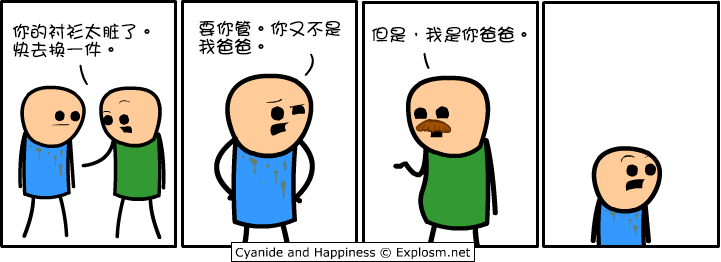
<style>
.page{position:relative;width:721px;height:262px;background:#ffffff}
.page>*{position:absolute;margin:0}
.t1{font:18px/18px "DFGirl";color:#000000}
.t2{font:18px "DFGirl";color:#000000}
.t3{font:18px "DFGirl";color:#000000;font-style:italic}
</style>
<div class="page">
<p class="t1" style="left:12px;top:23px;width:138px;height:35px">你的衬衫太脏了。<br>快去换一件。</p>
<p class="t1" style="left:198px;top:20px;width:143px;height:35px">要你管。你又不是<br>我爸爸。</p>
<p class="t2" style="left:372px;top:26px;width:155px;height:17px">但是，我<span class="t3">是</span>你爸爸。</p>
</div>
